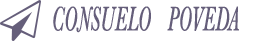
<style>
.page{position:relative;width:263px;height:41px;background:#ffffff}
.page>*{position:absolute;margin:0}
.t1{font:35px "Baskerville-Italic";color:#655e7a;font-weight:bold;scale:0.56 1}
.t2{font:14px "Papyrus";color:#000000;font-weight:bold;font-style:italic}
</style>
<div class="page">
<p class="t1" style="left:53px;top:6px;width:186px;height:27px"><span class="t2">                               <br>                                               </span>CONSUELO   POVEDA</p>
</div>
